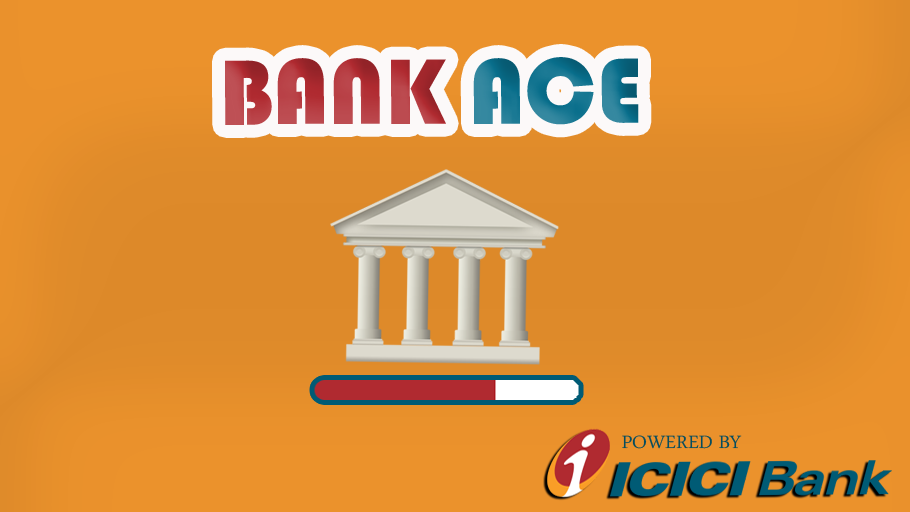
<style>
.page{position:relative;width:910px;height:512px}
.page>*{position:absolute;margin:0}
.t1{font:96.1px "Bauhaus93"}
.t2{font:26.1px "ArabicTypesetting";color:#064d5f;scale:1.03 1}
</style>
<div class="page">
<p class="t1" style="left:225px;top:57px;width:414px;height:68px">BANK ACE</p>
<p class="t2" style="left:622px;top:435px;width:120px;height:14px">POWERED BY</p>
</div>
